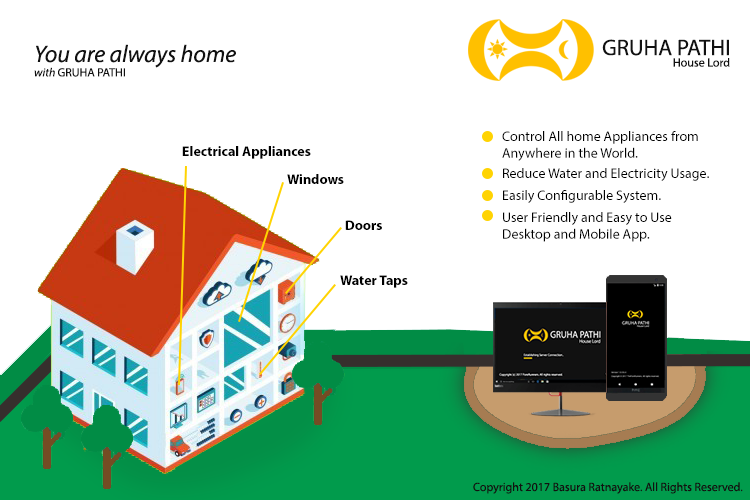
<style>
.page{position:relative;width:750px;height:500px;background:#ffffff}
.page>*{position:absolute;margin:0}
.t1{font:22.5px "MyriadPro-Regular";color:#111111}
.t2{font:24px "MyriadPro-It";color:#111111}
.t3{font:12px "MyriadPro-It";color:#111111}
.t4{font:12px "MyriadPro-Regular";color:#111111}
.t5{font:14px "MyriadPro-Regular";color:#000000}
.t6{font:14px "MyriadPro-Bold";color:#000000}
</style>
<div class="page">
<p class="t1" style="left:602px;top:39px;width:127px;height:17px">GRUHA PATHI</p>
<p class="t2" style="left:34px;top:44px;width:202px;height:33px">You are always home <br><span class="t3">with </span><span class="t4">GRUHA PATHI</span></p>
<p class="t4" style="left:673px;top:58px;width:57px;height:9px">House Lord</p>
<p class="t5" style="left:502px;top:131px;width:196px;height:30px">Control All home Appliances from<br>Anywhere in the World.</p>
<p class="t6" style="left:182px;top:146px;width:129px;height:13px">Electrical Appliances</p>
<p class="t6" style="left:287px;top:174px;width:57px;height:10px">Windows</p>
<p class="t5" style="left:503px;top:168px;width:206px;height:13px">Reduce Water and Electricity Usage.</p>
<p class="t5" style="left:503px;top:190px;width:158px;height:13px">Easily Configurable System.</p>
<p class="t6" style="left:345px;top:220px;width:37px;height:10px">Doors</p>
<p class="t5" style="left:503px;top:212px;width:169px;height:30px">User Friendly and Easy to Use<br>Desktop and Mobile App.</p>
<p class="t6" style="left:340px;top:275px;width:68px;height:13px">Water Taps</p>
<p class="t4" style="left:473px;top:482px;width:270px;height:12px">Copyright 2017 Basura Ratnayake. All Rights Reserved.</p>
</div>
